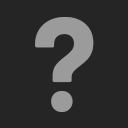
<style>
.page{position:relative;width:128px;height:128px;background:#252525}
.page>*{position:absolute;margin:0}
.t1{font:134.4px "BarlowSemiCondensed-Bold";letter-spacing:0.05em;color:#9b9b9b}
</style>
<div class="page">
<p class="t1" style="left:35px;top:17px;width:59px;height:95px">?</p>
</div>
